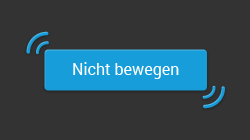
<style>
.page{position:relative;width:250px;height:140px;background:#333333}
.page>*{position:absolute;margin:0}
.t1{font:16px "Roboto-Regular";color:#ffffff}
</style>
<div class="page">
<p class="t1" style="left:73px;top:62px;width:106px;height:17px">Nicht bewegen</p>
</div>
